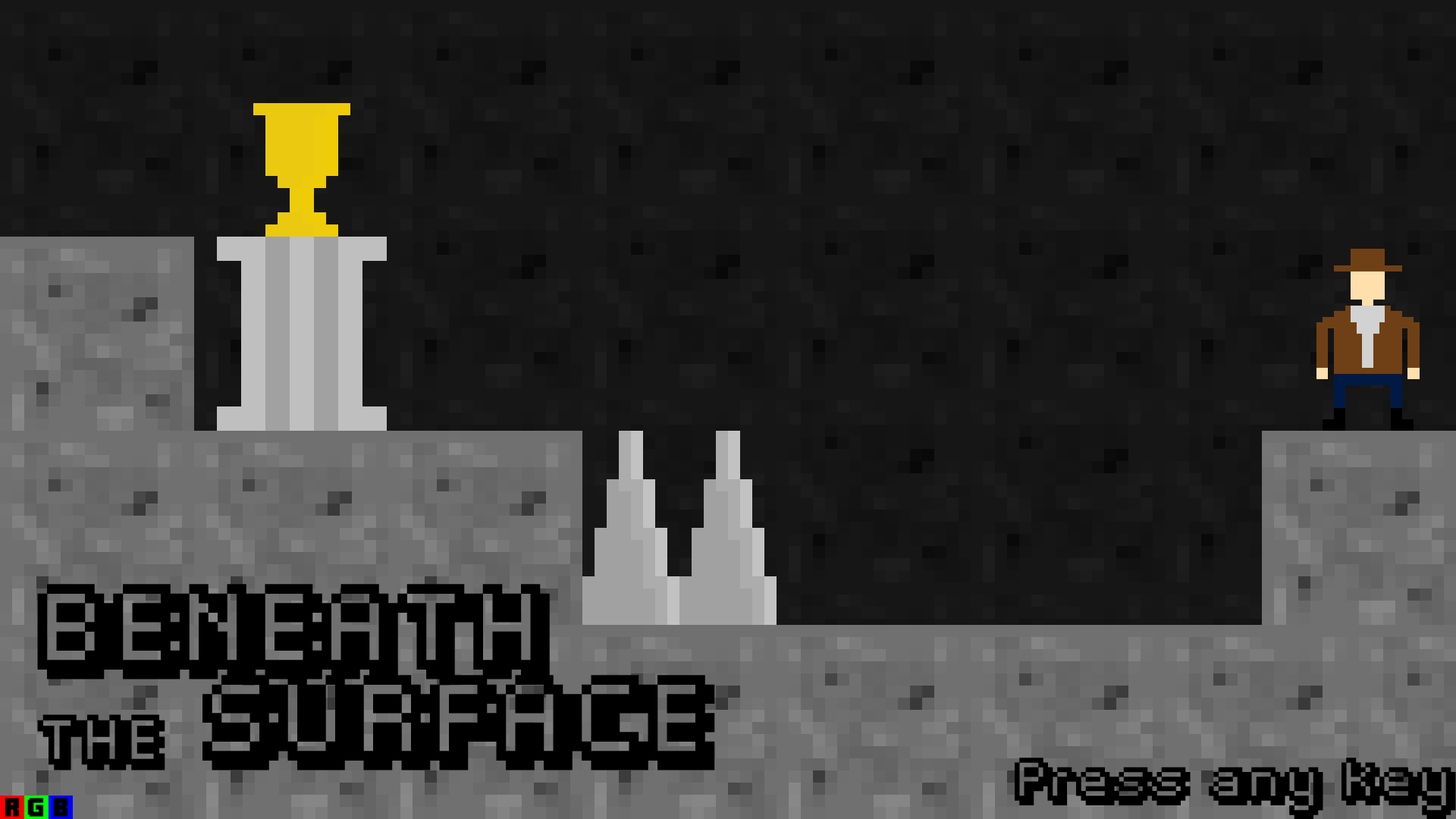
<style>
.page{position:relative;width:1456px;height:819px;background:#161616}
.page>*{position:absolute;margin:0}
.t1{font:75.8px "Fipps-Regular";color:#000000}
.t2{font:44.2px "Fipps-Regular";color:#000000}
.t3{font:37.9px "Fipps-Regular";color:#000000}
</style>
<div class="page">
<p class="t1" style="left:37px;top:584px;width:678px;height:186px">BENEATH<br><span class="t2">THE</span> SURFACE</p>
<p class="t3" style="left:1015px;top:758px;width:441px;height:62px">Press any key</p>
</div>
